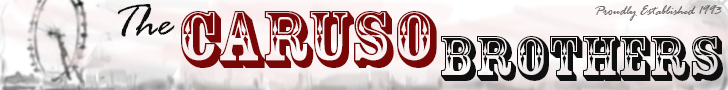
<style>
.page{position:relative;width:728px;height:90px}
.page>*{position:absolute;margin:0}
.t1{font:48px "RageItalic";color:#0f0f0f}
.t2{font:14px "RageItalic";color:#6e6b6b}
.t3{font:75px "RosewoodStd-Regular";color:#790707}
.t4{font:60px "RosewoodStd-Regular";color:#0f0f0f}
</style>
<div class="page">
<p class="t1" style="left:117px;top:4px;width:58px;height:33px;rotate:-1deg">The</p>
<p class="t2" style="left:595px;top:5px;width:127px;height:16px">Proudly Established 1993</p>
<p class="t3" style="left:181px;top:11px;width:256px;height:57px">Caruso</p>
<p class="t4" style="left:441px;top:36px;width:282px;height:45px">Brothers</p>
</div>
